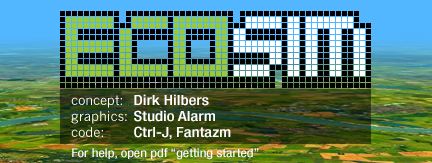
<style>
.page{position:relative;width:432px;height:163px}
.page>*{position:absolute;margin:0}
.t1{font:14px "HelveticaNeueLTStd-MdCn";color:#ffffff;scale:1.2 1}
.t2{font:12px "HelveticaNeueLTStd-Cn";color:#ffffff;scale:1.2 1}
</style>
<div class="page">
<p class="t1" style="left:134px;top:94px;width:75px;height:12px">Dirk Hilbers</p>
<p class="t1" style="left:134px;top:110px;width:81px;height:12px">Studio Alarm</p>
<p class="t1" style="left:134px;top:126px;width:97px;height:13px">Ctrl-J, Fantazm</p>
<p class="t2" style="left:72px;top:148px;width:187px;height:12px">For help, open pdf “getting started”</p>
</div>
